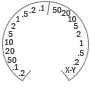
<style>
.page{position:relative;width:90px;height:90px;background:#ffffff}
.page>*{position:absolute;margin:0}
.t1{font:9px "FranklinGothic-MediumCond";color:#4a4a4a}
</style>
<div class="page">
<p class="t1" style="left:39px;top:5px;width:6px;height:6px">.1</p>
<p class="t1" style="left:16px;top:16px;width:4px;height:6px">1</p>
<p class="t1" style="left:22px;top:11px;width:6px;height:6px">.5</p>
<p class="t1" style="left:29px;top:7px;width:7px;height:6px">.2</p>
<p class="t1" style="left:52px;top:7px;width:10px;height:6px">50</p>
<p class="t1" style="left:61px;top:10px;width:10px;height:6px">20</p>
<p class="t1" style="left:68px;top:16px;width:9px;height:6px">10</p>
<p class="t1" style="left:11px;top:23px;width:5px;height:6px">2</p>
<p class="t1" style="left:73px;top:23px;width:5px;height:6px">5</p>
<p class="t1" style="left:5px;top:39px;width:9px;height:6px">10</p>
<p class="t1" style="left:8px;top:31px;width:5px;height:6px">5</p>
<p class="t1" style="left:76px;top:31px;width:5px;height:6px">2</p>
<p class="t1" style="left:79px;top:40px;width:5px;height:6px">1</p>
<p class="t1" style="left:5px;top:48px;width:10px;height:6px">20</p>
<p class="t1" style="left:78px;top:50px;width:6px;height:6px">.5</p>
<p class="t1" style="left:7px;top:57px;width:10px;height:6px">50</p>
<p class="t1" style="left:12px;top:64px;width:7px;height:6px">.1</p>
<p class="t1" style="left:73px;top:59px;width:6px;height:6px">.2</p>
<p class="t1" style="left:18px;top:70px;width:7px;height:6px">.2</p>
<p class="t1" style="left:65px;top:67px;width:11px;height:6px">X-Y</p>
</div>
